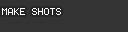
<style>
.page{position:relative;width:128px;height:32px;background:#333333}
.page>*{position:absolute;margin:0}
.t1{font:8px "Terminal";color:#ffffff}
</style>
<div class="page">
<p class="t1" style="left:2px;top:8px;width:59px;height:7px">MAKE SHOTS</p>
</div>
